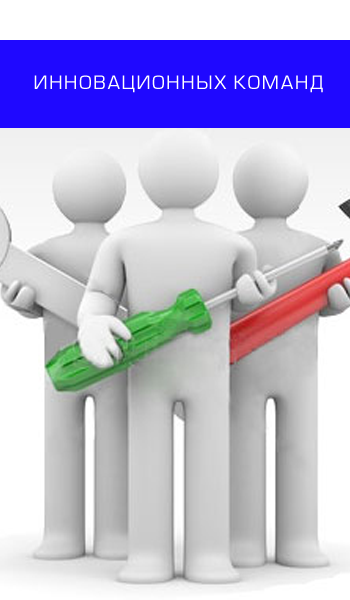
<style>
.page{position:relative;width:350px;height:600px}
.page>*{position:absolute;margin:0}
.t1{font:18px "Europe";letter-spacing:0.08em;color:#ffffff}
</style>
<div class="page">
<p class="t1" style="left:34px;top:75px;width:289px;height:18px">ÈÍÍÎÂÀÖÈÎÍÍÛÕ ÊÎÌÀÍÄ</p>
</div>
